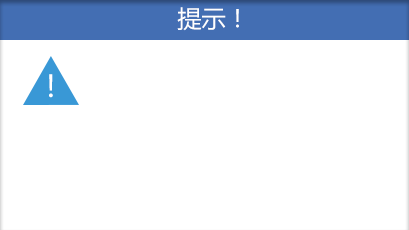
<style>
.page{position:relative;width:409px;height:230px;background:#ffffff}
.page>*{position:absolute;margin:0}
.t1{font:24px "MicrosoftYaHei";color:#ffffff}
.t2{font:30px "MicrosoftYaHei";color:#ffffff}
</style>
<div class="page">
<p class="t1" style="left:177px;top:7px;width:62px;height:24px">提示！</p>
<p class="t2" style="left:49px;top:74px;width:4px;height:24px">！</p>
</div>
